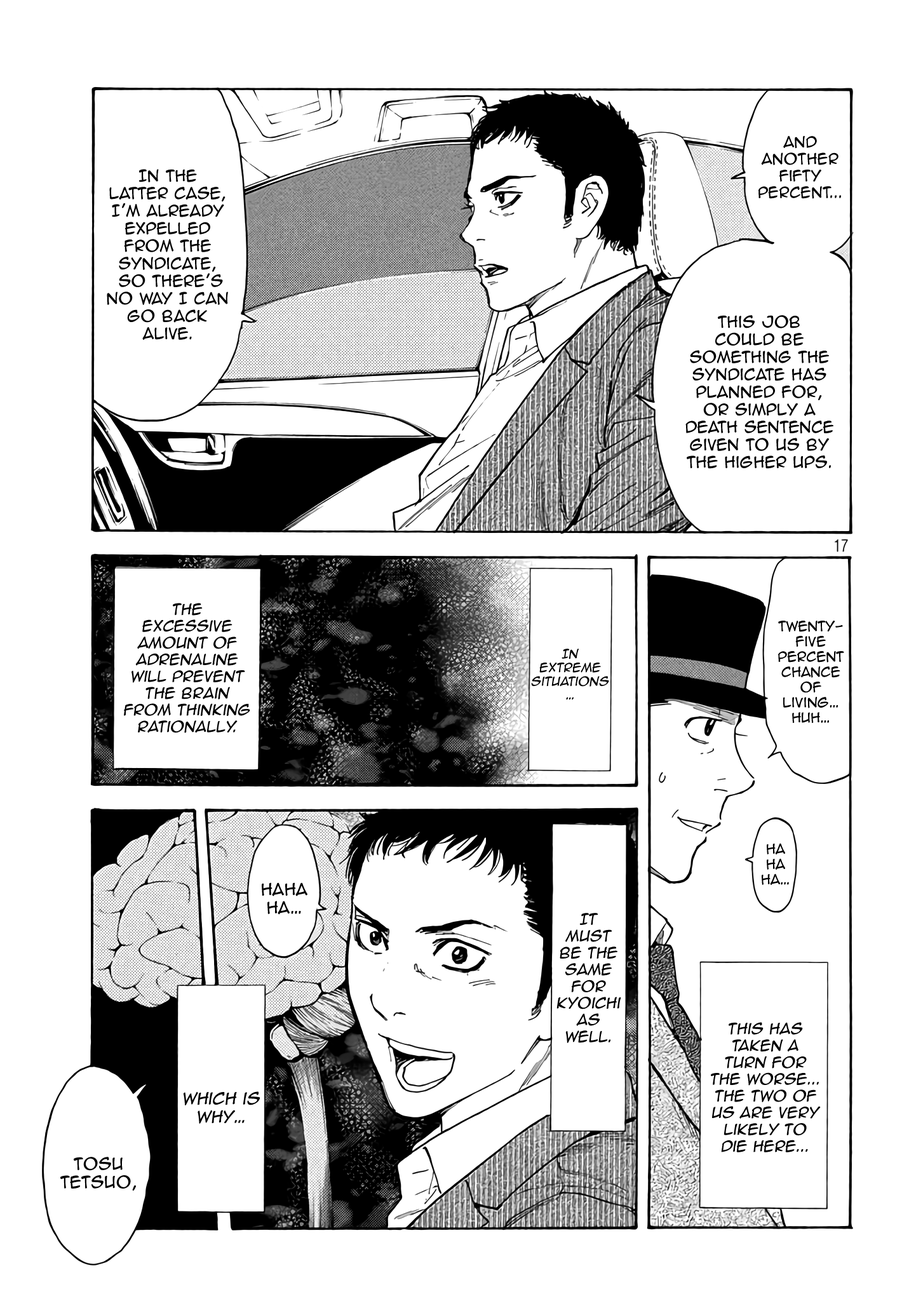
<style>
.page{position:relative;width:916px;height:1301px;background:#ffffff}
.page>*{position:absolute;margin:0}
.t1{font:14px "AnimeAce2.0BB";color:#000000}
.t2{font:14.6px "AnimeAce2.0BB";color:#000000}
.t3{font:14px "AnimeAce2.0BB";color:#000000;font-style:italic}
.t4{font:12.7px "AnimeAce2.0BB";color:#000000}
.t5{font:11.4px "AnimeAce2.0BB";color:#000000;font-style:italic}
.t6{font:15.3px "AnimeAce2.0BB";color:#000000}
.t7{font:15.3px "AnimeAce2.0BB";color:#000000;font-style:italic}
</style>
<div class="page">
<p class="t1" style="left:759px;top:136px;width:82px;height:63px;text-align:center">And <br>another fifty percent...</p>
<p class="t2" style="left:107px;top:169px;width:121px;height:171px;text-align:center">In the <br>latter case, <br>I’m already expelled from the syndicate,<br> so there’s no way I can <br>go back <br>alive.</p>
<p class="t2" style="left:686px;top:315px;width:148px;height:154px;text-align:center">This job <br>could be something the syndicate has planned for, or simply a death sentence given to us by the higher ups.</p>
<p class="t3" style="left:124px;top:603px;width:126px;height:130px;text-align:center">the <br>excessive amount of adrenaline will prevent the brain from thinking rationally.</p>
<p class="t4" style="left:778px;top:621px;width:66px;height:102px;text-align:center">twenty-<br>five percent chance of living… huh…</p>
<p class="t5" style="left:531px;top:649px;width:78px;height:51px;text-align:center">In extreme situations…</p>
<p class="t4" style="left:762px;top:843px;width:27px;height:42px;text-align:center">Ha<br>ha<br>ha…</p>
<p class="t6" style="left:262px;top:883px;width:46px;height:32px;text-align:center">Haha<br>ha…</p>
<p class="t3" style="left:557px;top:913px;width:64px;height:130px;text-align:center">It must be the same for Kyoichi <br>as well.</p>
<p class="t3" style="left:711px;top:1022px;width:110px;height:131px;text-align:center">This has taken a turn for the worse... The two of us are very likely to die here...</p>
<p class="t7" style="left:183px;top:1092px;width:77px;height:32px;text-align:center">Which is why…</p>
<p class="t6" style="left:60px;top:1157px;width:76px;height:34px;text-align:center">Tosu Tetsuo,</p>
</div>
